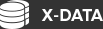
<style>
.page{position:relative;width:103px;height:29px;background:#333333}
.page>*{position:absolute;margin:0}
.t1{font:16px "Montserrat-SemiBold";color:#ffffff}
</style>
<div class="page">
<p class="t1" style="left:41px;top:9px;width:62px;height:12px">X-DATA</p>
</div>
